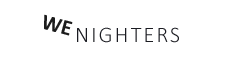
<style>
.page{position:relative;width:227px;height:71px;background:#ffffff}
.page>*{position:absolute;margin:0}
.t1{font:22px "Calibri-Bold";color:#1c1c1c}
.t2{font:22px "Calibri-Light";letter-spacing:0.1em;color:#1b1c22}
</style>
<div class="page">
<p class="t1" style="left:44px;top:14px;width:29px;height:22px;rotate:15deg">WE</p>
<p class="t2" style="left:77px;top:27px;width:102px;height:16px">NIGHTERS</p>
</div>
